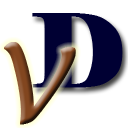
<style>
.page{position:relative;width:128px;height:128px;background:#ffffff}
.page>*{position:absolute;margin:0}
.t1{font:100px "Elephant-Regular";color:#000033;font-weight:bold}
.t2{font:100px "LucidaHandwriting-Italic";font-weight:bold}
</style>
<div class="page">
<p class="t1" style="left:32px;top:13px;width:91px;height:75px">D</p>
<p class="t2" style="left:4px;top:42px;width:72px;height:83px">V</p>
</div>
